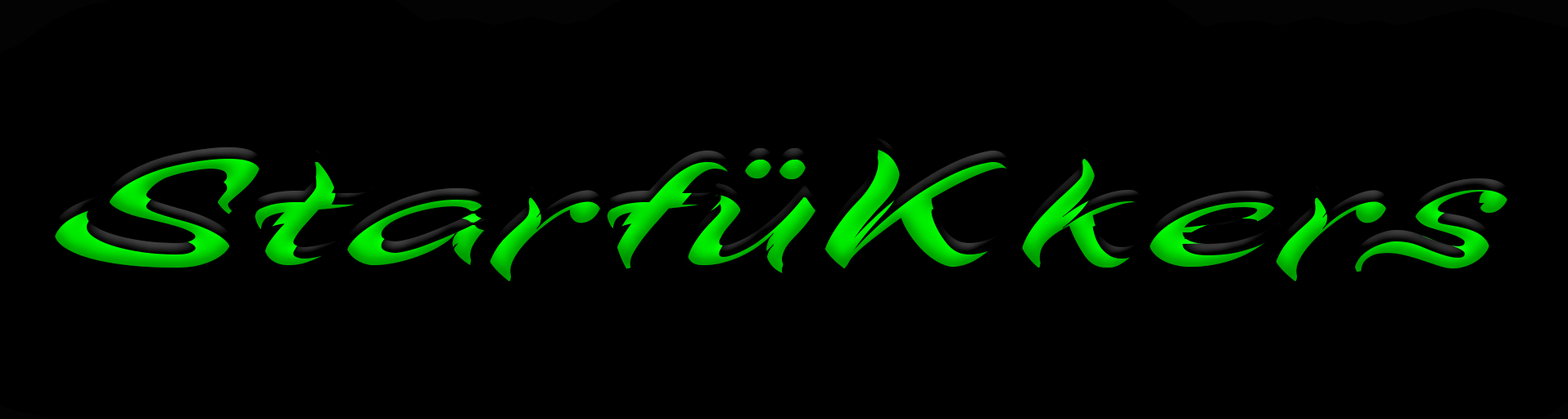
<style>
.page{position:relative;width:1568px;height:419px;background:#000000}
.page>*{position:absolute;margin:0}
.t1{font:170.8px "AngelEyesW90-Regular"}
</style>
<div class="page">
<p class="t1" style="left:54px;top:138px;width:1455px;height:144px">StarfüKkers</p>
</div>
